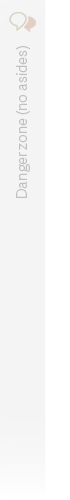
<style>
.page{position:relative;width:70px;height:500px;background:#f4f4f4}
.page>*{position:absolute;margin:0}
.t1{font:15px "AdelleSans-Thin";letter-spacing:-0.02em;color:#c0c0c0}
</style>
<div class="page">
<p class="t1" style="left:16px;top:46px;width:14px;height:152px;rotate:-90deg">Danger zone (no asides)</p>
</div>
